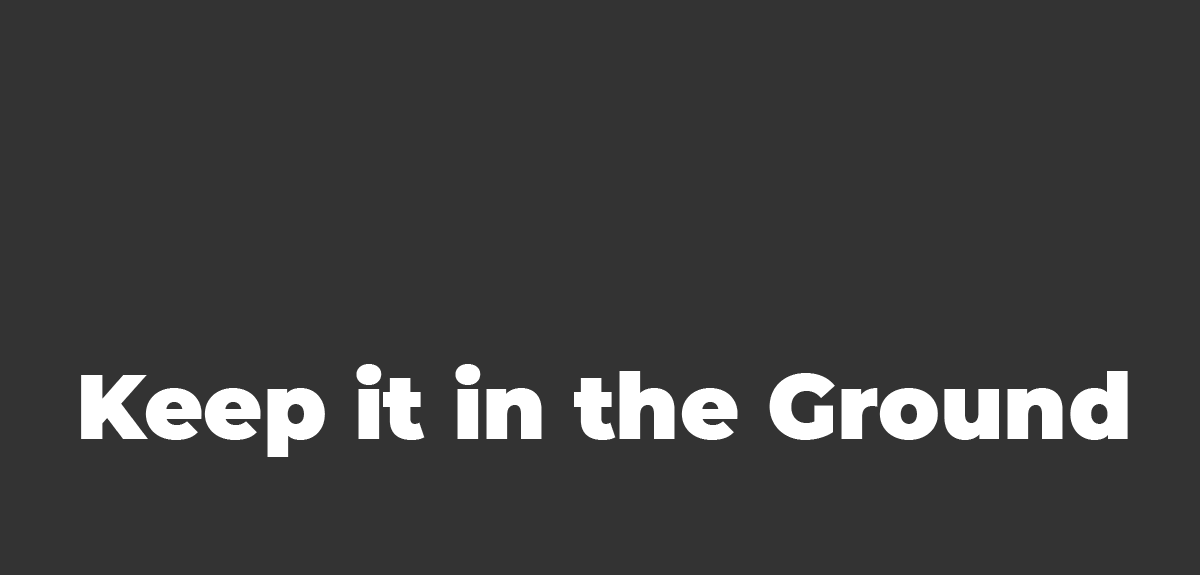
<style>
.page{position:relative;width:1200px;height:575px;background:#333333}
.page>*{position:absolute;margin:0}
.t1{font:91px "Montserrat-Black";color:#ffffff}
</style>
<div class="page">
<p class="t1" style="left:81px;top:364px;width:1047px;height:93px">Keep it in the Ground</p>
</div>
